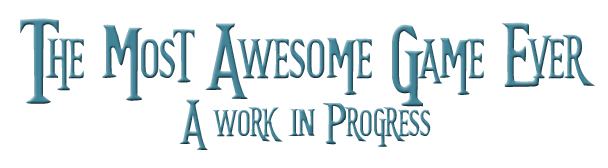
<style>
.page{position:relative;width:608px;height:168px;background:#ffffff}
.page>*{position:absolute;margin:0}
.t1{font:72px "FutureTimeSplitters"}
.t2{font:48px "FutureTimeSplitters"}
</style>
<div class="page">
<p class="t1" style="left:20px;top:18px;width:575px;height:132px;text-align:center">The Most Awesome Game Ever<br><span class="t2">A work in Progress</span></p>
</div>
